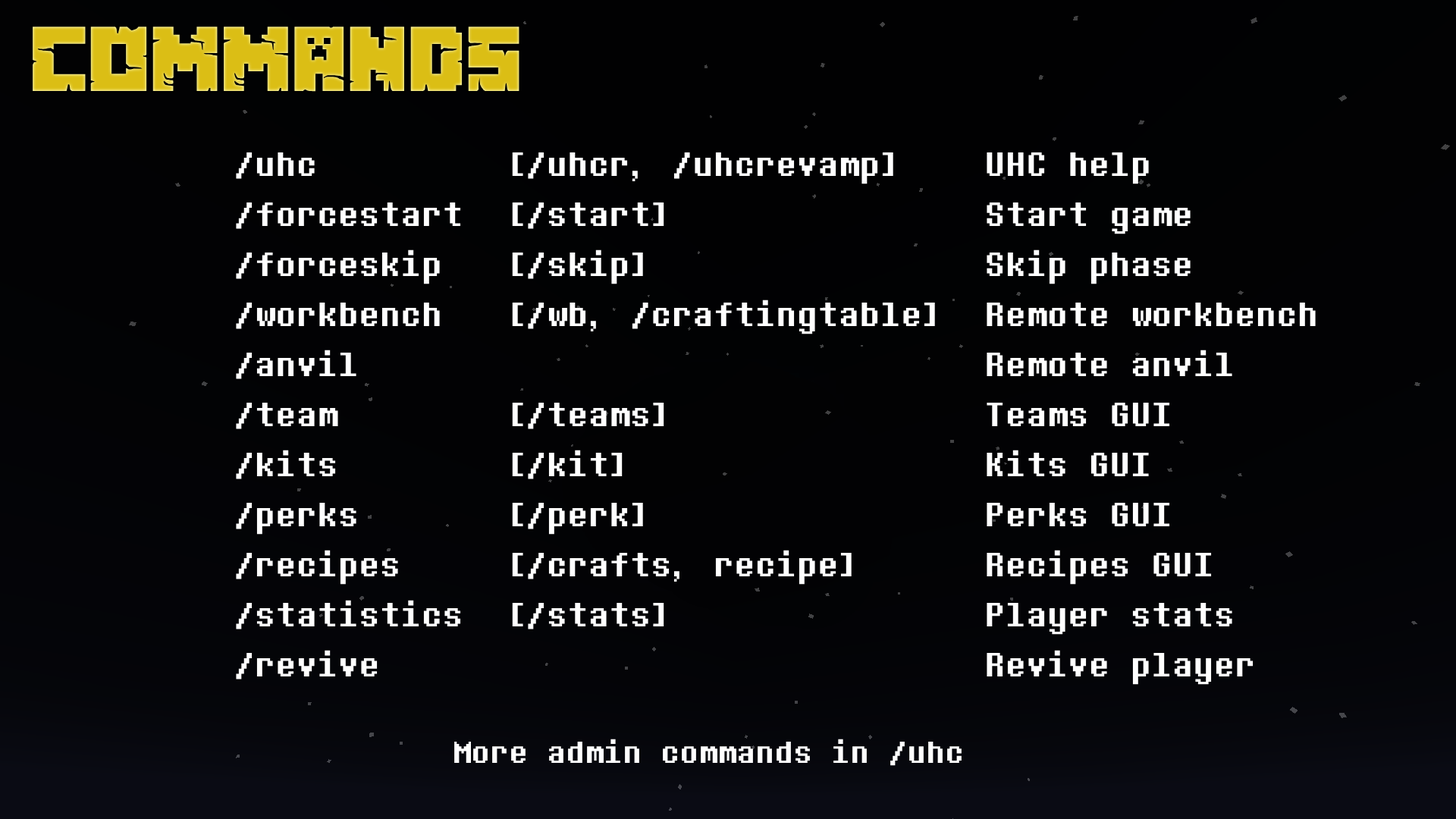
<style>
.page{position:relative;width:1456px;height:819px}
.page>*{position:absolute;margin:0}
.t1{font:81.9px "MinecrafterAlt";color:#dbbe15}
.t2{font:41.7px "DeterminationMonoWeb";color:#ffffff}
.t3{font:37.9px "DeterminationMonoWeb";color:#ffffff}
</style>
<div class="page">
<p class="t1" style="left:33px;top:27px;width:486px;height:65px">commands</p>
<p class="t2" style="left:236px;top:152px;width:1080px;height:533px">/uhc         [/uhcr, /uhcrevamp]    UHC help<br>/forcestart  [/start]               Start game<br>/forceskip   [/skip]                Skip phase<br>/workbench   [/wb, /craftingtable]  Remote workbench<br>/anvil                              Remote anvil<br>/team        [/teams]               Teams GUI<br>/kits        [/kit]                 Kits GUI<br>/perks       [/perk]                Perks GUI<br>/recipes     [/crafts, recipe]      Recipes GUI<br>/statistics  [/stats]               Player stats<br>/revive                             Revive player</p>
<p class="t3" style="left:454px;top:739px;width:508px;height:27px">More admin commands in /uhc</p>
</div>
